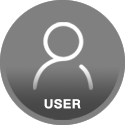
<style>
.page{position:relative;width:125px;height:125px;background:#808080}
.page>*{position:absolute;margin:0}
.t1{font:12px "PingFangSC-Semibold";letter-spacing:0.1em;color:#ffffff;font-weight:bold}
</style>
<div class="page">
<p class="t1" style="left:44px;top:99px;width:37px;height:10px">USER</p>
</div>
